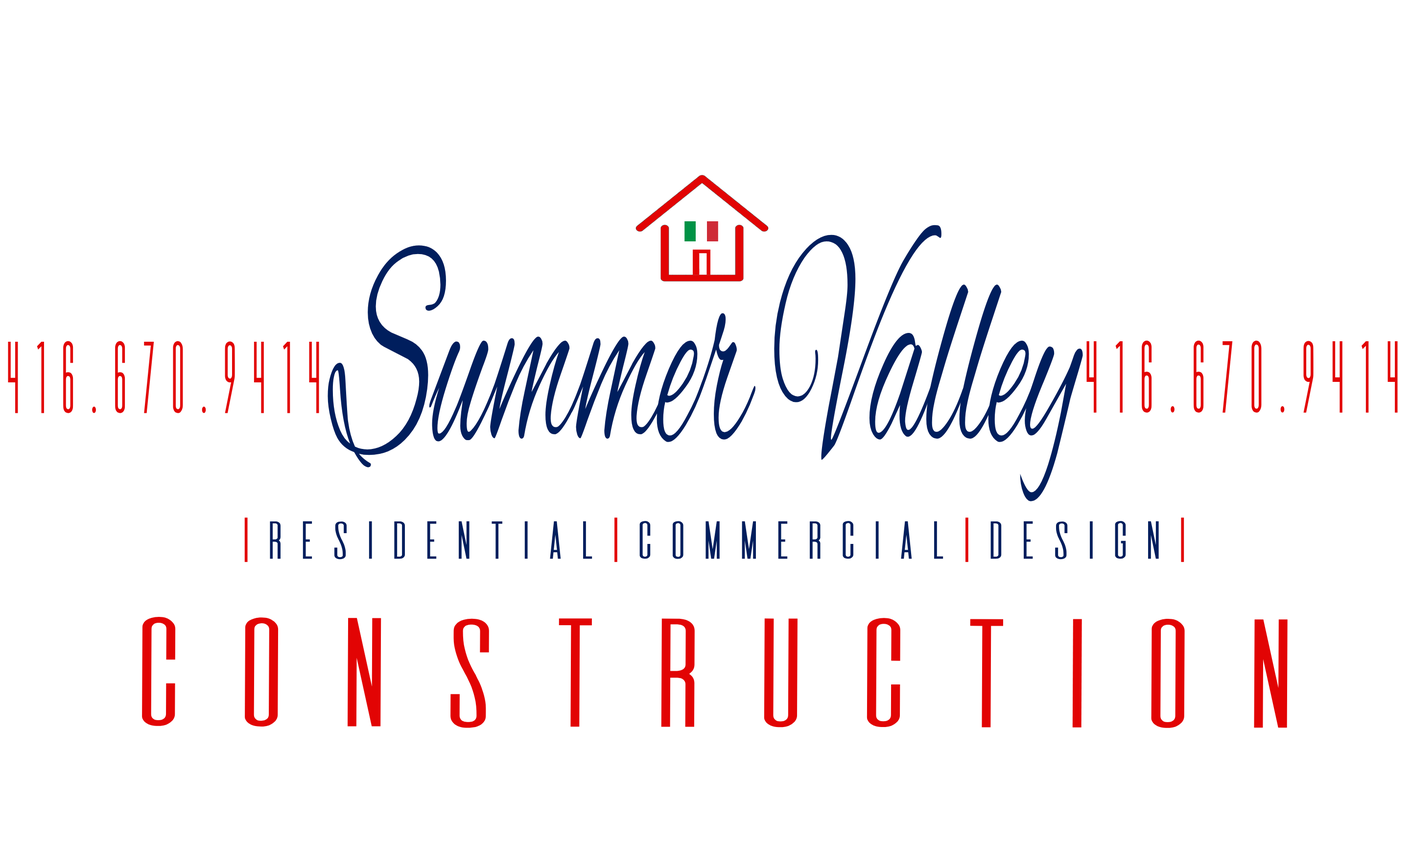
<style>
.page{position:relative;width:1410px;height:846px;background:#ffffff}
.page>*{position:absolute;margin:0}
.t1{font:308.1px "AlexBrush-Regular";color:#001e5d;scale:0.44 1}
.t2{font:89px "DeValencia-Regular";letter-spacing:-0.03em;color:#e20404;scale:0.58 1}
.t3{font:46.7px "DeValencia-Regular";color:#001e5d;scale:1.2 1}
.t4{font:46.7px "DeValencia-Regular";color:#e20404;scale:1.2 1}
.t5{font:135.1px "DeValencia-Regular";color:#e20404;scale:1.29 1}
</style>
<div class="page">
<p class="t1" style="left:327px;top:225px;width:756px;height:276px">Summer Valley</p>
<p class="t2" style="left:8px;top:341px;width:311px;height:72px">416.670.9414</p>
<p class="t2" style="left:1086px;top:340px;width:312px;height:73px">416.670.9414</p>
<p class="t3" style="left:244px;top:517px;width:940px;height:45px"><span class="t4">|</span>RESIDENTIAL<span class="t4">|</span>COMMERCIAL<span class="t4">|</span>Design<span class="t4">|</span></p>
<p class="t5" style="left:142px;top:617px;width:1145px;height:111px">Construction</p>
</div>
